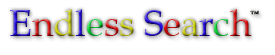
<style>
.page{position:relative;width:275px;height:55px;background:#ffffff}
.page>*{position:absolute;margin:0}
.t1{font:36.7px "BookAntiqua"}
.t2{font:8.4px "BookAntiqua"}
</style>
<div class="page">
<p class="t1" style="left:10px;top:9px;width:242px;height:27px">Endless Search</p>
<p class="t2" style="left:250px;top:10px;width:9px;height:5px">™</p>
</div>
